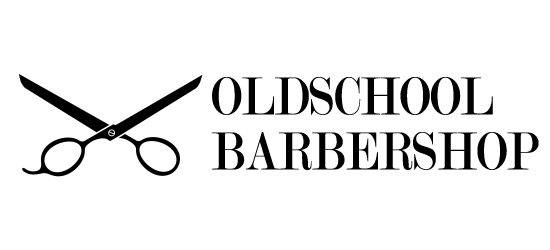
<style>
.page{position:relative;width:550px;height:250px;background:#ffffff}
.page>*{position:absolute;margin:0}
.t1{font:57.1px/55px "Modern-Regular";color:#000000;text-transform:uppercase;scale:0.84 1}
</style>
<div class="page">
<p class="t1" style="left:211px;top:76px;width:328px;height:94px">oLDSCHOOL<br>Barbershop</p>
</div>
